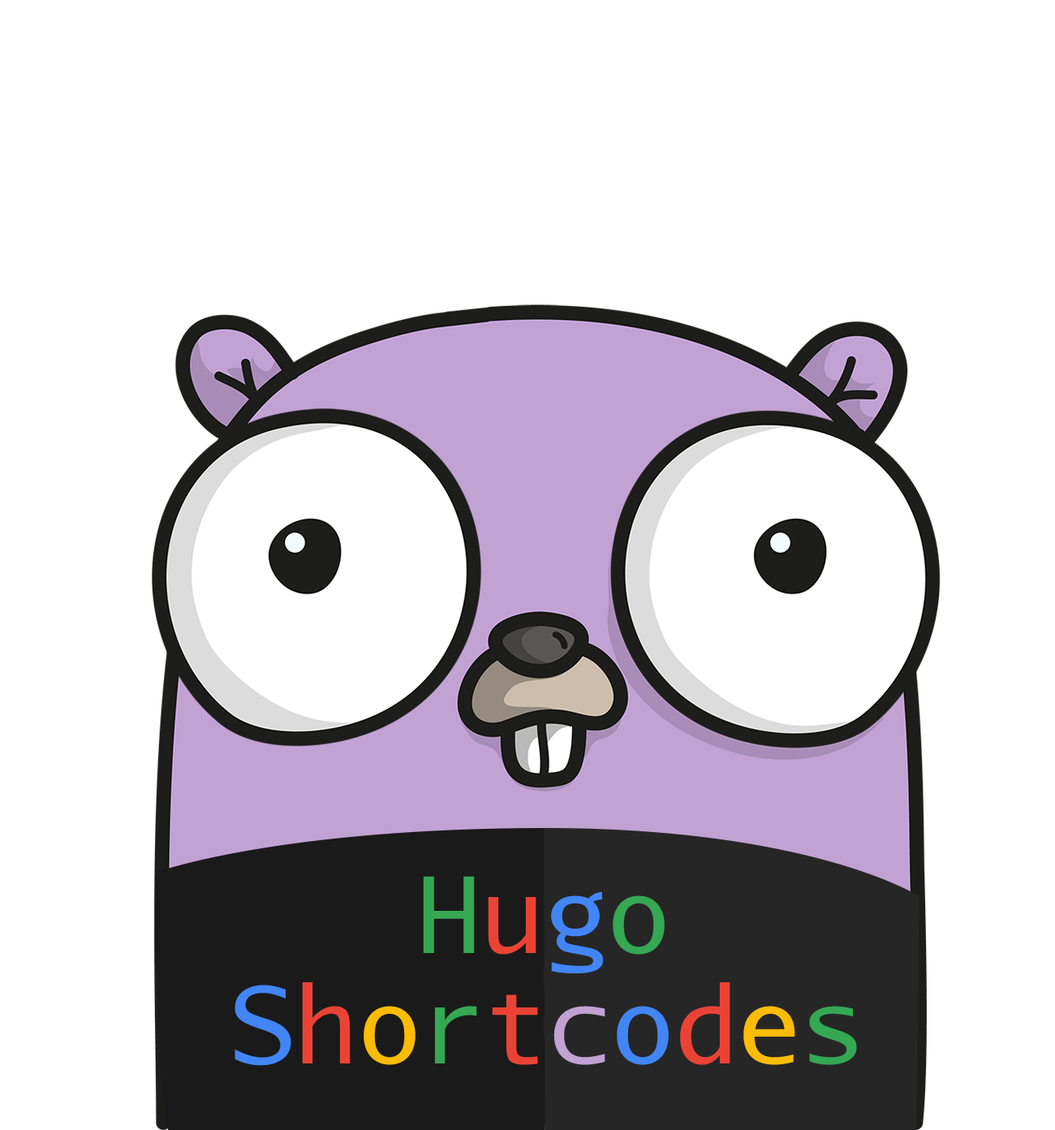
<style>
.page{position:relative;width:1055px;height:1130px;background:#ffffff}
.page>*{position:absolute;margin:0}
.t1{font:105.5px "AurulentSansMono-Regular";color:#34a853}
.t2{font:105.5px "AurulentSansMono-Regular";color:#ea4335}
.t3{font:105.5px "AurulentSansMono-Regular";color:#4285f4}
.t4{font:105.5px "AurulentSansMono-Regular";color:#fbbc05}
.t5{font:105.5px "AurulentSansMono-Regular";color:#c2a1d3}
</style>
<div class="page">
<p class="t1" style="left:423px;top:876px;width:242px;height:98px">H<span class="t2">u</span><span class="t3">g</span>o</p>
<p class="t3" style="left:235px;top:981px;width:622px;height:85px">S<span class="t2">h</span><span class="t4">o</span><span class="t1">r</span><span class="t2">t</span><span class="t5">c</span>o<span class="t2">d</span><span class="t4">e</span><span class="t1">s</span></p>
</div>
